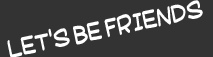
<style>
.page{position:relative;width:213px;height:57px;background:#333333}
.page>*{position:absolute;margin:0}
.t1{font:28px "SuplexmentaryComicNC";color:#ffffff;scale:0.8 1}
</style>
<div class="page">
<p class="t1" style="left:7px;top:0px;width:196px;height:58px;rotate:-12deg">LET'S BE FRIENDS</p>
</div>
